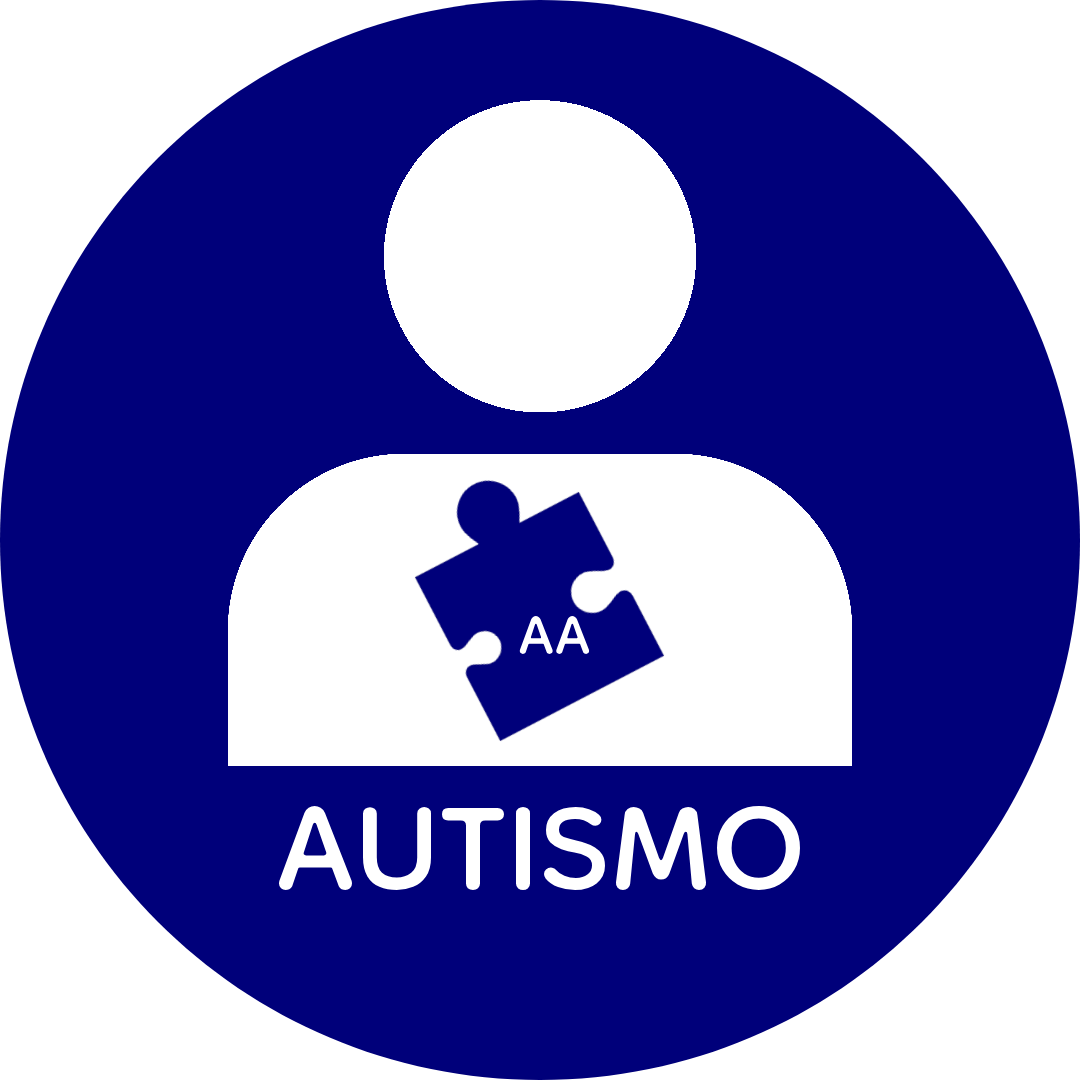
<style>
.page{position:relative;width:1080px;height:1080px;background:#00007a}
.page>*{position:absolute;margin:0}
.t1{font:90px "Dongle-Regular";color:#ffffff}
.t2{font:200px "Dongle-Regular";color:#ffffff}
</style>
<div class="page">
<p class="t1" style="left:519px;top:616px;width:71px;height:38px">AA</p>
<p class="t2" style="left:279px;top:806px;width:521px;height:84px">AUTISMO</p>
</div>
